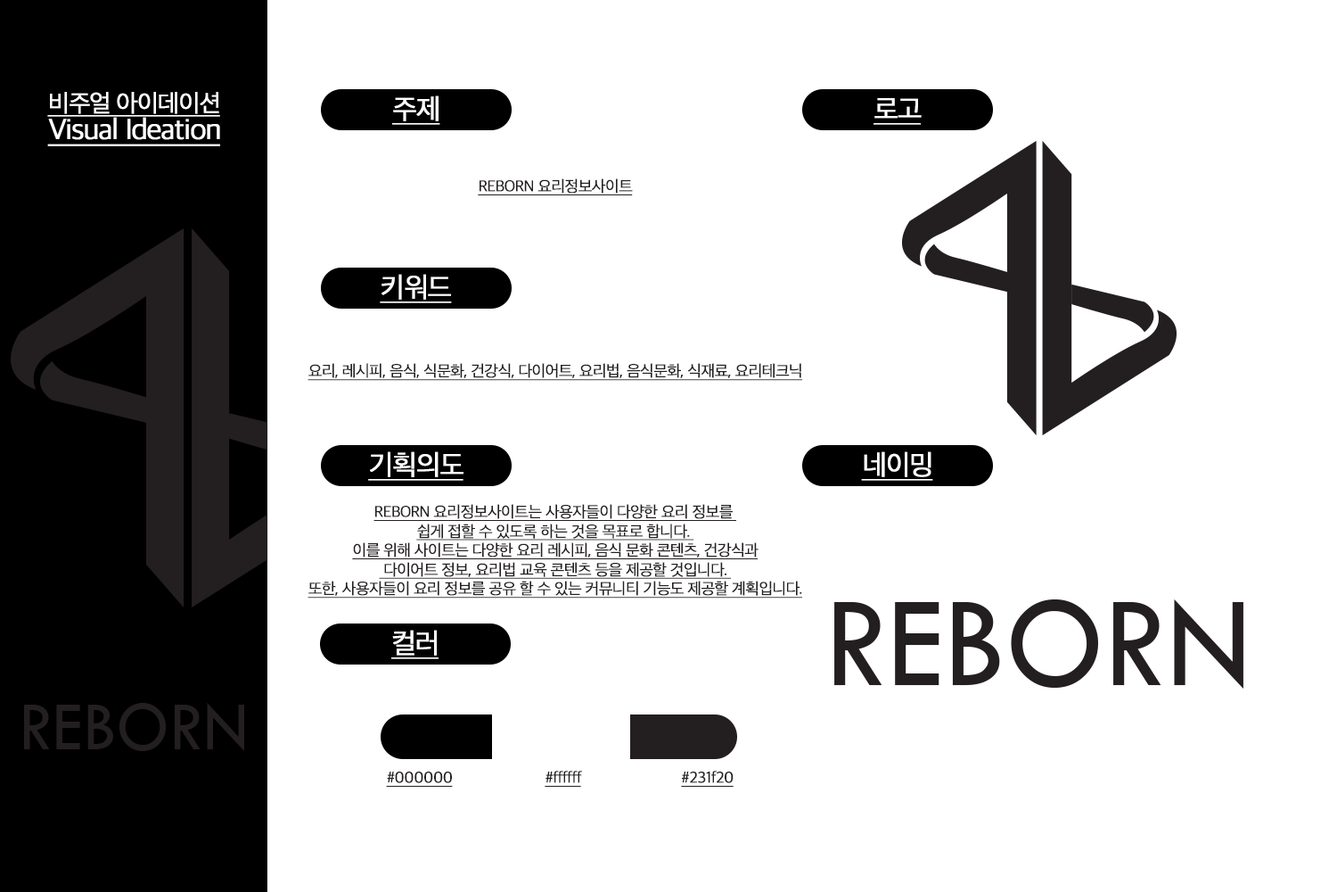
<style>
.page{position:relative;width:1337px;height:892px;background:#ffffff}
.page>*{position:absolute;margin:0}
.t1{font:24.6px "AppleSDGothicNeoL00";letter-spacing:-0.05em;color:#ffffff;font-weight:bold;text-decoration:underline}
.t2{font:28.2px "AppleSDGothicNeoL00";letter-spacing:-0.05em;color:#ffffff;font-weight:bold;text-decoration:underline}
.t3{font:29.6px "AppleSDGothicNeoL00";letter-spacing:-0.05em;color:#ffffff;font-weight:bold;text-decoration:underline}
.t4{font:16px "AppleSDGothicNeoL00";letter-spacing:-0.05em;color:#231f20;font-weight:bold;text-decoration:underline}
</style>
<div class="page">
<p class="t1" style="left:47px;top:92px;width:173px;height:25px">비주얼 아이데이션</p>
<p class="t2" style="left:392px;top:95px;width:48px;height:30px">주제</p>
<p class="t2" style="left:874px;top:98px;width:48px;height:27px">로고</p>
<p class="t3" style="left:47px;top:117px;width:173px;height:29px">Visual Ideation</p>
<p class="t4" style="left:478px;top:178px;width:155px;height:17px">REBORN 요리정보사이트</p>
<p class="t2" style="left:380px;top:274px;width:72px;height:29px">키워드</p>
<p class="t4" style="left:308px;top:363px;width:494px;height:18px">요리, 레시피, 음식, 식문화, 건강식, 다이어트, 요리법, 음식문화, 식재료, 요리테크닉</p>
<p class="t2" style="left:368px;top:451px;width:96px;height:30px">기획의도</p>
<p class="t2" style="left:861px;top:451px;width:73px;height:30px">네이밍</p>
<p class="t4" style="left:308px;top:504px;width:494px;height:94px;text-align:center">REBORN 요리정보사이트는 사용자들이 다양한 요리 정보를 <br>쉽게 접할 수 있도록 하는 것을 목표로 합니다. <br>이를 위해 사이트는 다양한 요리 레시피, 음식 문화 콘텐츠, 건강식과<br> 다이어트 정보, 요리법 교육 콘텐츠 등을 제공할 것입니다. <br>또한, 사용자들이 요리 정보를 공유 할 수 있는 커뮤니티 기능도 제공할 계획입니다.</p>
<p class="t2" style="left:391px;top:629px;width:48px;height:30px">컬러</p>
<p class="t4" style="left:386px;top:771px;width:67px;height:15px">#000000</p>
<p class="t4" style="left:545px;top:770px;width:37px;height:16px">#ffffff</p>
<p class="t4" style="left:681px;top:770px;width:53px;height:16px">#231f20</p>
</div>
